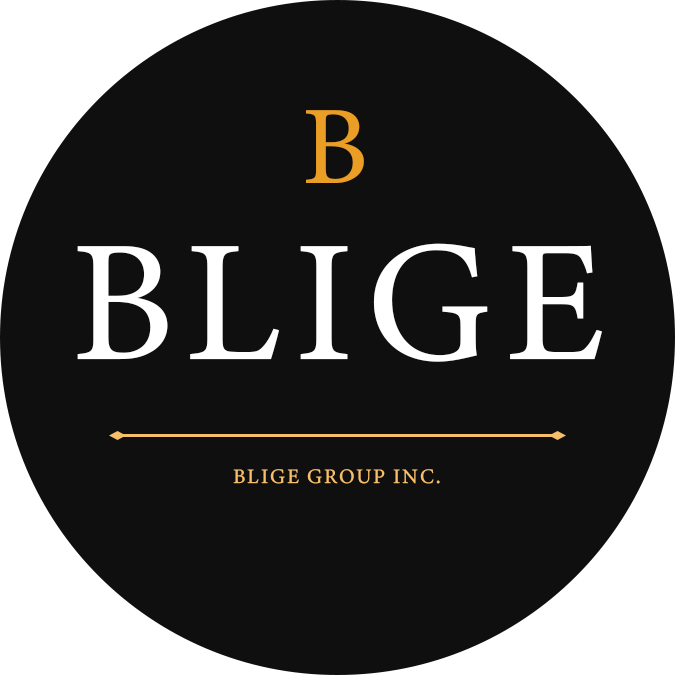
<style>
.page{position:relative;width:675px;height:675px;background:#0f0f0f}
.page>*{position:absolute;margin:0}
.t1{font:111.9px "MinionVariableConcept-Roman";letter-spacing:0.06em;color:#eb9e26}
.t2{font:173.5px "MinionVariableConcept-Roman";letter-spacing:0.06em;color:#ffffff}
.t3{font:20.7px "MinionVariableConcept-Roman";letter-spacing:0.08em;color:#f7bf69}
</style>
<div class="page">
<p class="t1" style="left:306px;top:110px;width:58px;height:73px">B</p>
<p class="t2" style="left:77px;top:243px;width:525px;height:119px">BLIGE</p>
<p class="t3" style="left:233px;top:469px;width:207px;height:15px">BLIGE GROUP INC.</p>
</div>
